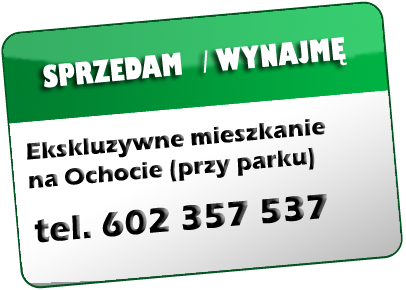
<style>
.page{position:relative;width:406px;height:290px;background:#ffffff}
.page>*{position:absolute;margin:0}
.t1{font:30px "GillSans-UltraBoldCondensed";color:#ffffff}
.t2{font:24px "ErasITC-Bold";color:#000000}
.t3{font:36px "ErasITC-Bold";color:#000000}
</style>
<div class="page">
<p class="t1" style="left:43px;top:37px;width:304px;height:51px;rotate:-5deg">SPRZEDAM  / WYNAJMĘ</p>
<p class="t2" style="left:27px;top:119px;width:299px;height:70px;rotate:-5deg">Ekskluzywne mieszkanie<br>na Ochocie (przy parku)</p>
<p class="t3" style="left:34px;top:194px;width:293px;height:49px;rotate:-5deg">tel. 602 357 537</p>
</div>
